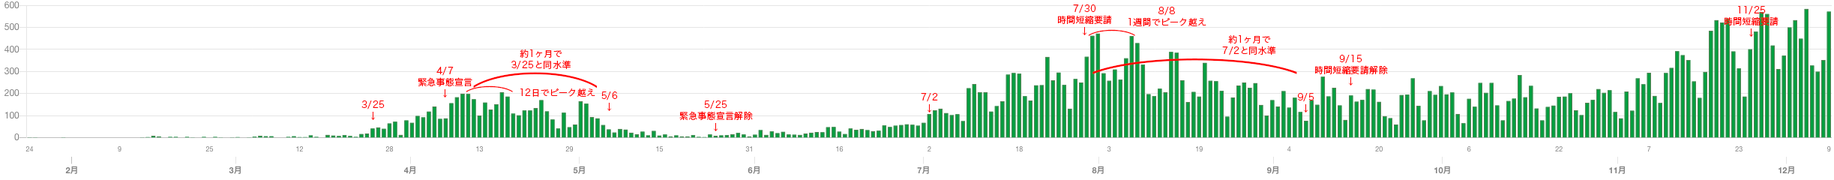
<style>
.page{position:relative;width:1834px;height:180px;background:#ffffff}
.page>*{position:absolute;margin:0}
.t1{font:9px/11.3px "HiraginoSans-W3";letter-spacing:0.02em;color:#ff0101}
.t2{font:46.9px "HiraginoSans-W0";letter-spacing:0.02em;color:#ff0101;scale:0.63 1}
.t3{font:208.2px "HiraginoSans-W0";letter-spacing:0.02em;color:#ff0101;scale:0.38 1}
.t4{font:125.9px "HiraginoSans-W0";letter-spacing:0.02em;color:#ff0101;scale:0.63 1}
.t5{font:9px "HiraginoSans-W3";letter-spacing:0.02em;color:#ff0101}
</style>
<div class="page">
<p class="t1" style="left:1058px;top:4px;width:54px;height:31px;text-align:center">7/30<br>時間短縮要請<br>↓</p>
<p class="t1" style="left:1725px;top:6px;width:54px;height:31px;text-align:center">11/25<br>時間短縮要請<br>↓</p>
<p class="t1" style="left:1129px;top:7px;width:78px;height:19px;text-align:center">8/8<br>1週間でピーク越え</p>
<p class="t2" style="left:1088px;top:29px;width:48px;height:7px;rotate:90deg">(</p>
<p class="t1" style="left:1222px;top:35px;width:54px;height:21px;text-align:center">約1ヶ月で<br>7/2と同水準</p>
<p class="t1" style="left:512px;top:50px;width:59px;height:20px;text-align:center">約1ヶ月で<br>3/25と同水準</p>
<p class="t3" style="left:1093px;top:58px;width:205px;height:16px;rotate:90deg">(</p>
<p class="t1" style="left:1316px;top:55px;width:72px;height:31px;text-align:center">9/15<br>時間短縮要請解除<br>↓</p>
<p class="t1" style="left:418px;top:67px;width:54px;height:31px;text-align:center">4/7<br>緊急事態宣言<br>↓</p>
<p class="t4" style="left:473px;top:72px;width:124px;height:16px;rotate:90deg">(</p>
<p class="t2" style="left:466px;top:86px;width:47px;height:6px;rotate:90deg">(</p>
<p class="t5" style="left:520px;top:88px;width:76px;height:9px">12日でピーク越え</p>
<p class="t1" style="left:362px;top:100px;width:23px;height:20px;text-align:center">3/25<br>↓</p>
<p class="t1" style="left:602px;top:92px;width:16px;height:19px;text-align:center">5/6<br>↓</p>
<p class="t1" style="left:680px;top:100px;width:73px;height:31px;text-align:center">5/25<br>緊急事態宣言解除<br>↓</p>
<p class="t1" style="left:921px;top:93px;width:17px;height:19px;text-align:center">7/2<br>↓</p>
<p class="t1" style="left:1298px;top:93px;width:17px;height:19px;text-align:center">9/5<br>↓</p>
</div>
